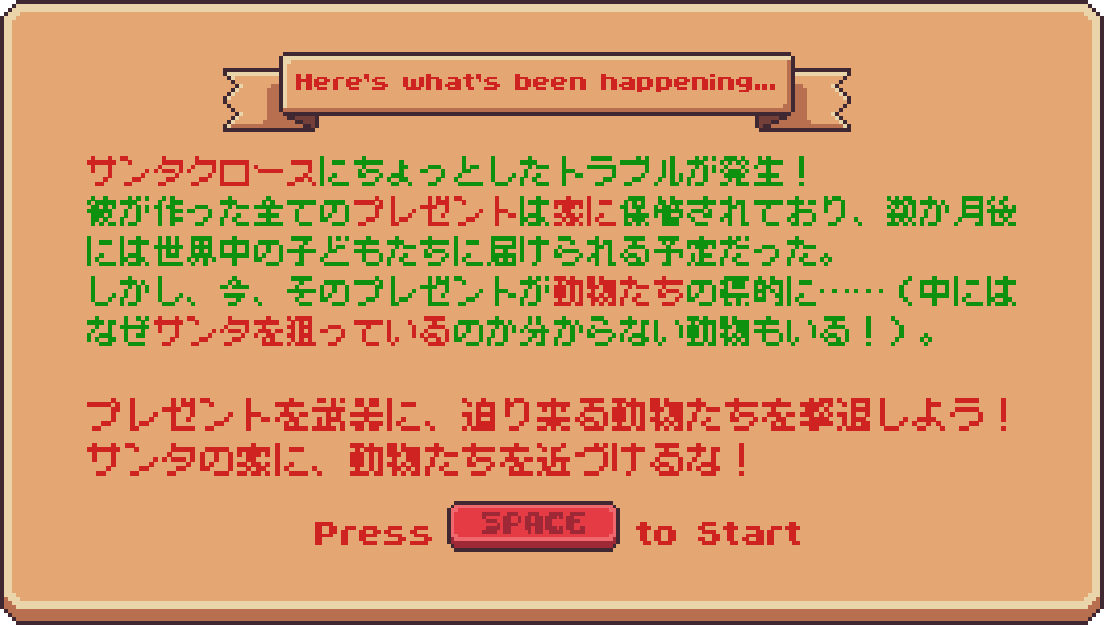
<style>
.page{position:relative;width:1104px;height:625px;background:#e4a672}
.page>*{position:absolute;margin:0}
.t1{font:42.1px "ByteBounce";color:#cf2322}
.t2{font:33.7px "MisakiGothic2nd";color:#0d910f}
.t3{font:33.7px "MisakiGothic2nd";color:#cf2322}
.t4{font:37.9px "MisakiGothic2nd";color:#cf2322}
.t5{font:58.9px "ByteBounce";color:#cf2322}
</style>
<div class="page">
<p class="t1" style="left:296px;top:74px;width:479px;height:18px">Here's what's been happening...</p>
<p class="t2" style="left:87px;top:156px;width:929px;height:320px"><span class="t3">サンタクロース</span>にちょっとしたトラブルが発生！<br>彼が作った全ての<span class="t3">プレゼント</span>は<span class="t3">家に</span>保管されており、数か月後には世界中の子どもたちに届けられる予定だった。<br>しかし、今、そのプレゼントが<span class="t3">動物たち</span>の標的に……（中にはなぜ<span class="t3">サンタを狙っている</span>のか分からない動物もいる！）。<br><br><span class="t4">プレゼントを武器に、迫り来る動物たちを撃退しよう！サンタの家に、動物たちを近づけるな！</span></p>
<p class="t5" style="left:315px;top:522px;width:485px;height:23px">Press           to Start</p>
</div>
